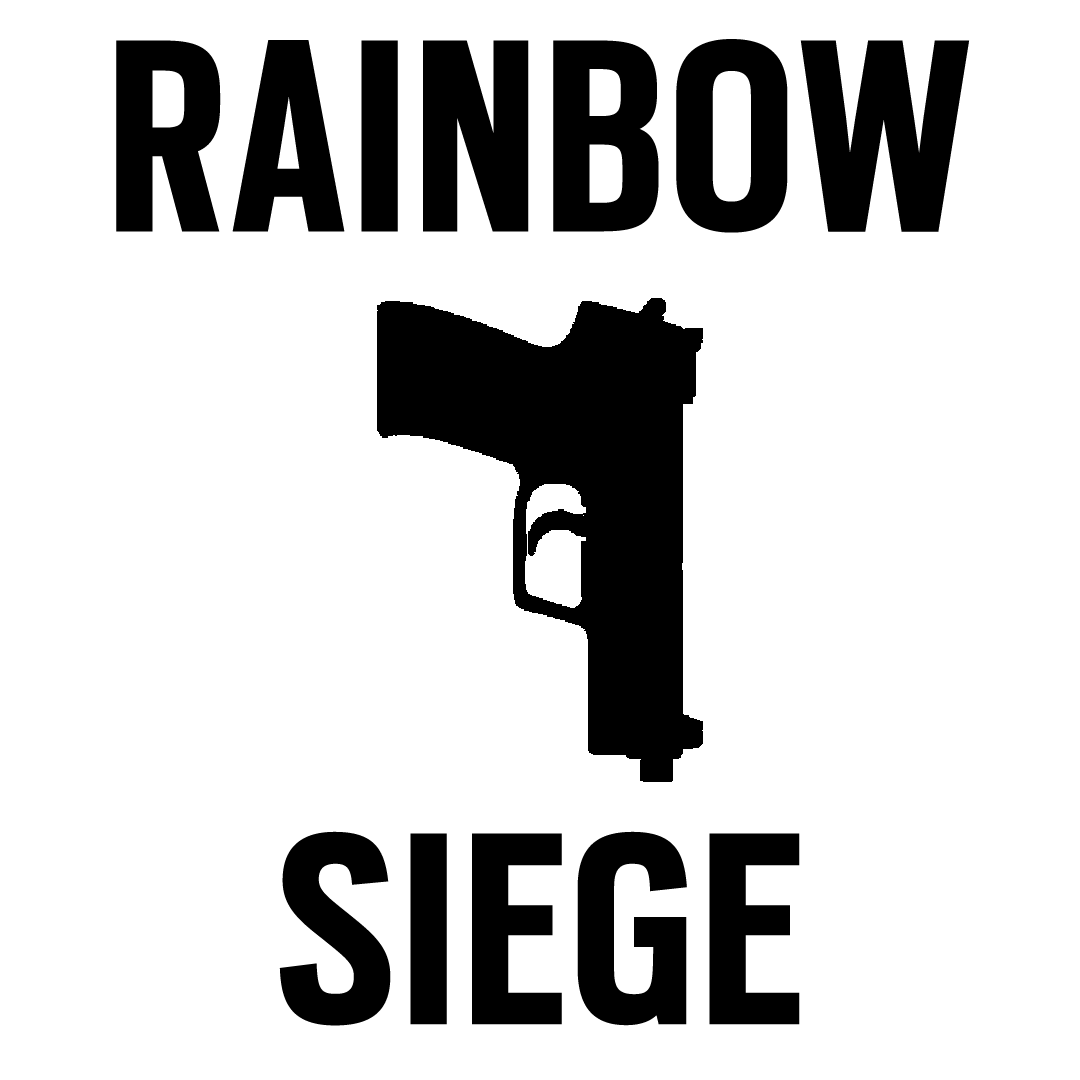
<style>
.page{position:relative;width:1080px;height:1080px;background:#ffffff}
.page>*{position:absolute;margin:0}
.t1{font:304.5px "ScoutCond-Bold";letter-spacing:0.025em;color:#000000}
</style>
<div class="page">
<p class="t1" style="left:116px;top:39px;width:854px;height:194px">RAINBOW</p>
<p class="t1" style="left:279px;top:831px;width:521px;height:195px">SIEGE</p>
</div>
